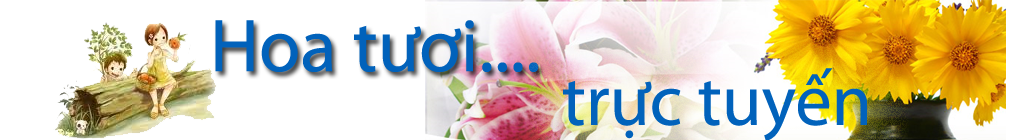
<style>
.page{position:relative;width:1024px;height:140px;background:#ffffff}
.page>*{position:absolute;margin:0}
.t1{font:75.3px "MyriadPro-Regular";color:#0162bb}
.t2{font:72.7px "MyriadPro-Regular";color:#0162bb}
</style>
<div class="page">
<p class="t1" style="left:215px;top:20px;width:324px;height:52px">Hoa tươi....</p>
<p class="t2" style="left:563px;top:68px;width:304px;height:73px">trực tuyến</p>
</div>
